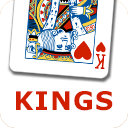
<style>
.page{position:relative;width:128px;height:128px;background:#ffffff}
.page>*{position:absolute;margin:0}
.t1{font:25.9px "Verdana-Bold";letter-spacing:0.05em;color:#d02000}
</style>
<div class="page">
<p class="t1" style="left:16px;top:91px;width:97px;height:20px">KINGS</p>
</div>
